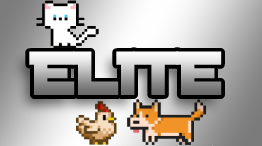
<style>
.page{position:relative;width:262px;height:146px}
.page>*{position:absolute;margin:0}
.t1{font:67px "DistantGalaxy"}
</style>
<div class="page">
<p class="t1" style="left:29px;top:51px;width:193px;height:44px">ELITE</p>
</div>
